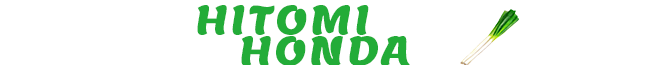
<style>
.page{position:relative;width:665px;height:65px;background:#ffffff}
.page>*{position:absolute;margin:0}
.t1{font:40px/31px "Lemon-Regular";letter-spacing:0.075em;color:#23ac38}
</style>
<div class="page">
<p class="t1" style="left:197px;top:5px;width:213px;height:61px">HITOMI <br>   HONDA</p>
</div>
